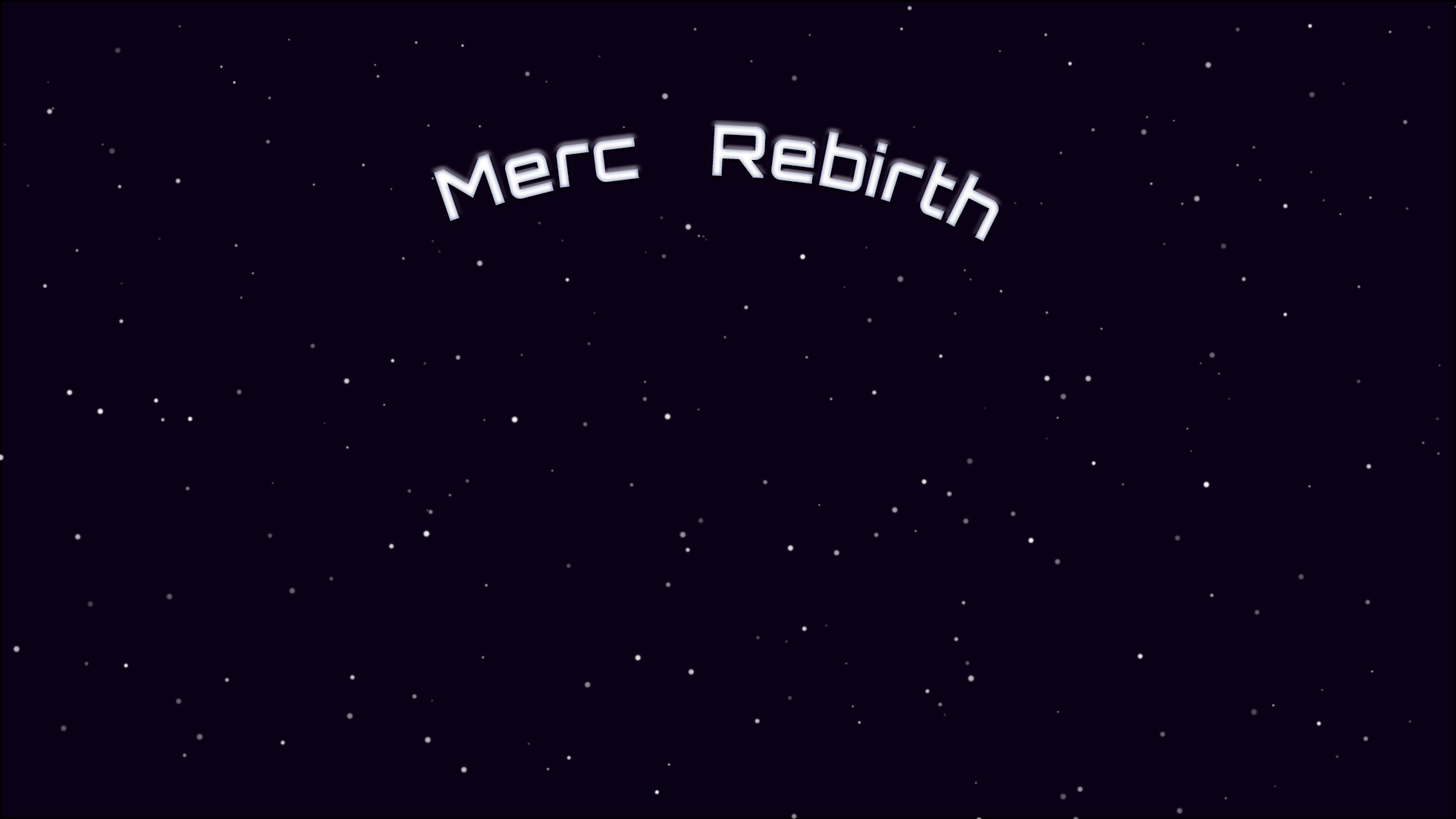
<style>
.page{position:relative;width:1456px;height:819px;background:#0b0116}
.page>*{position:absolute;margin:0}
.t1{font:70.9px "Orbitron-Bold"}
</style>
<div class="page">
<p class="t1" style="left:434px;top:124px;width:565px;height:118px">Merc   Rebirth</p>
</div>
